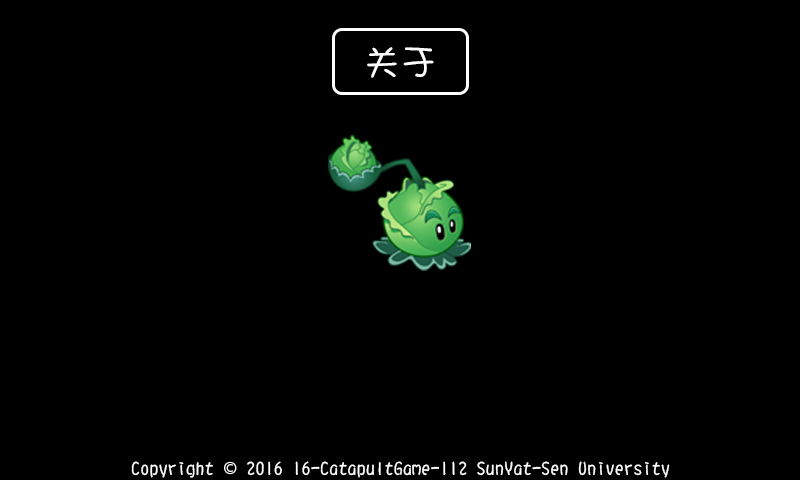
<style>
.page{position:relative;width:800px;height:480px;background:#000000}
.page>*{position:absolute;margin:0}
.t1{font:36px "DFShaoNvW5";color:#ffffff}
.t2{font:18px "DFShaoNvW5";color:#ffffff}
.t3{font:18px "AdobeHeitiStd-Regular";color:#ffffff}
</style>
<div class="page">
<p class="t1" style="left:367px;top:47px;width:67px;height:31px">关于</p>
<p class="t2" style="left:131px;top:461px;width:539px;height:17px">Copyright <span class="t3">©</span> 2016 16-CatapultGame-112 SunYat-Sen University</p>
</div>
